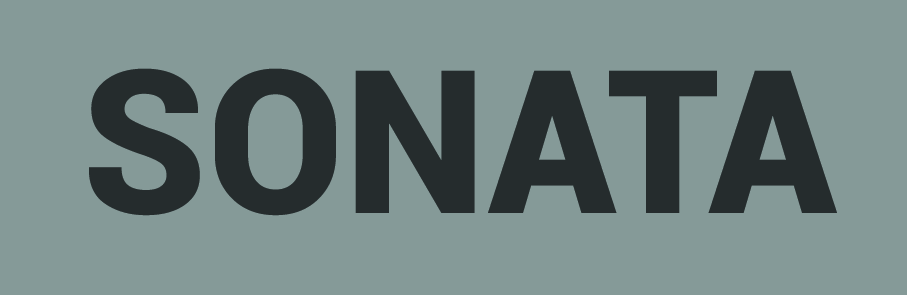
<style>
.page{position:relative;width:907px;height:295px;background:#859a98}
.page>*{position:absolute;margin:0}
.t1{font:200px "Roboto-Black";color:#252c2d}
</style>
<div class="page">
<p class="t1" style="left:89px;top:68px;width:748px;height:148px">SONATA</p>
</div>
